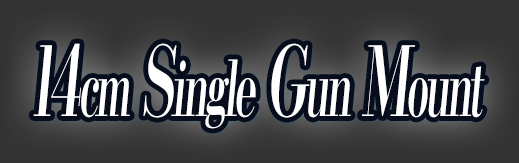
<style>
.page{position:relative;width:519px;height:163px}
.page>*{position:absolute;margin:0}
.t1{font:76.8px "KochoStd-Heavy";letter-spacing:-0.08em;color:#ffffff;font-style:italic;scale:0.53 1}
.t2{font:96px "KochoStd-Heavy";letter-spacing:-0.08em;color:#ffffff;font-style:italic;scale:0.53 1}
</style>
<div class="page">
<p class="t1" style="left:33px;top:43px;width:452px;height:86px"><span class="t2">14</span>cm<span class="t2"> S</span>ingle<span class="t2"> G</span>un<span class="t2"> M</span>ount</p>
</div>
